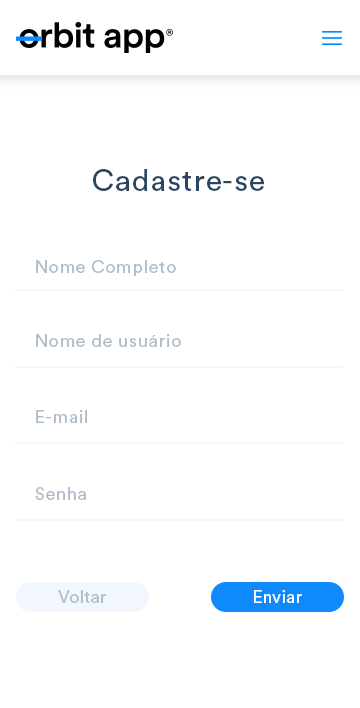
<style>
.page{position:relative;width:360px;height:708px;background:#ffffff}
.page>*{position:absolute;margin:0}
.t1{font:30px "CircularStd-Book";letter-spacing:0.036em;color:#294661}
.t2{font:18px "CircularStd-Book";letter-spacing:0.036em;color:#aebcc9}
.t3{font:18px "CircularStd-Book";color:#aebcc9}
.t4{font:18px "CircularStd-Book";color:#feffff}
</style>
<div class="page">
<p class="t1" style="left:93px;top:169px;width:171px;height:22px">Cadastre-se</p>
<p class="t2" style="left:36px;top:260px;width:140px;height:16px">Nome Completo</p>
<p class="t2" style="left:36px;top:334px;width:145px;height:13px">Nome de usuário</p>
<p class="t2" style="left:36px;top:410px;width:51px;height:13px">E-mail</p>
<p class="t2" style="left:35px;top:487px;width:51px;height:13px">Senha</p>
<p class="t3" style="left:58px;top:590px;width:48px;height:13px">Voltar</p>
<p class="t4" style="left:254px;top:590px;width:48px;height:13px">Enviar</p>
</div>
